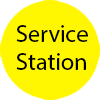
<style>
.page{position:relative;width:100px;height:100px;background:#fff601}
.page>*{position:absolute;margin:0}
.t1{font:24px "MyriadPro-Regular";color:#000000}
</style>
<div class="page">
<p class="t1" style="left:16px;top:25px;width:72px;height:45px">Service<br>Station</p>
</div>
